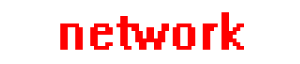
<style>
.page{position:relative;width:300px;height:64px;background:#ffffff}
.page>*{position:absolute;margin:0}
.t1{font:48px "System";color:#ff0000}
</style>
<div class="page">
<p class="t1" style="left:60px;top:12px;width:184px;height:38px">network</p>
</div>
